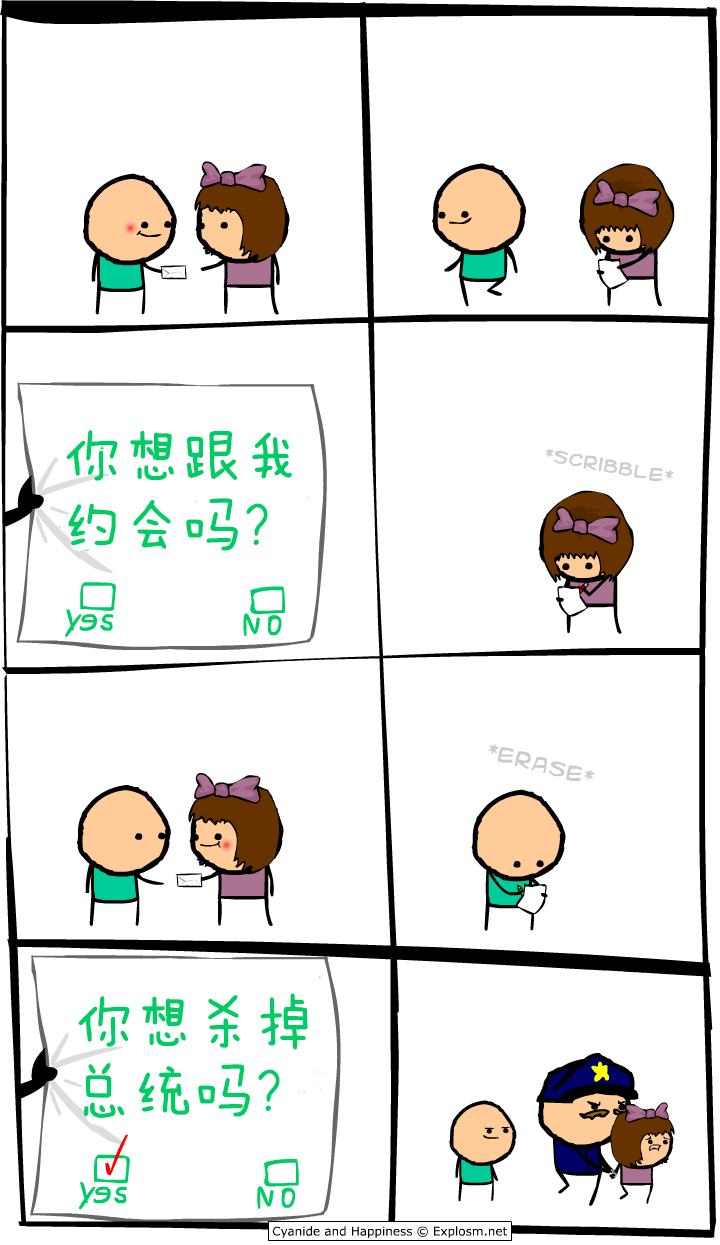
<style>
.page{position:relative;width:720px;height:1245px;background:#ffffff}
.page>*{position:absolute;margin:0}
.t1{font:60px/69px "FZMWJW--GB1-0";color:#00cc66}
</style>
<div class="page">
<p class="t1" style="left:66px;top:430px;width:226px;height:121px">你想跟我<br>约会吗？</p>
<p class="t1" style="left:78px;top:993px;width:230px;height:125px">你想杀掉<br>总统吗？</p>
</div>
